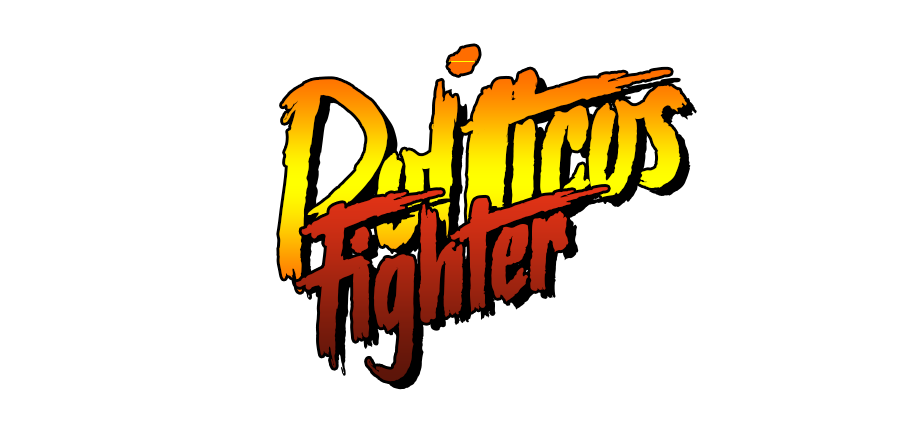
<style>
.page{position:relative;width:900px;height:435px;background:#ffffff}
.page>*{position:absolute;margin:0}
.t1{font:466.5px "Stranger-back-in-the-Night";color:#ff6d00;scale:1.2 1}
.t2{font:344.1px "Stranger-back-in-the-Night"}
.t3{font:259.9px "Stranger-back-in-the-Night"}
</style>
<div class="page">
<p class="t1" style="left:448px;top:46px;width:31px;height:29px">.</p>
<p class="t2" style="left:279px;top:69px;width:408px;height:223px;rotate:-13deg">Políticos</p>
<p class="t2" style="left:289px;top:77px;width:408px;height:223px;rotate:-13deg">Políticos</p>
<p class="t3" style="left:296px;top:187px;width:312px;height:195px;rotate:-15deg">Fighter</p>
<p class="t3" style="left:306px;top:195px;width:312px;height:195px;rotate:-15deg">Fighter</p>
</div>
